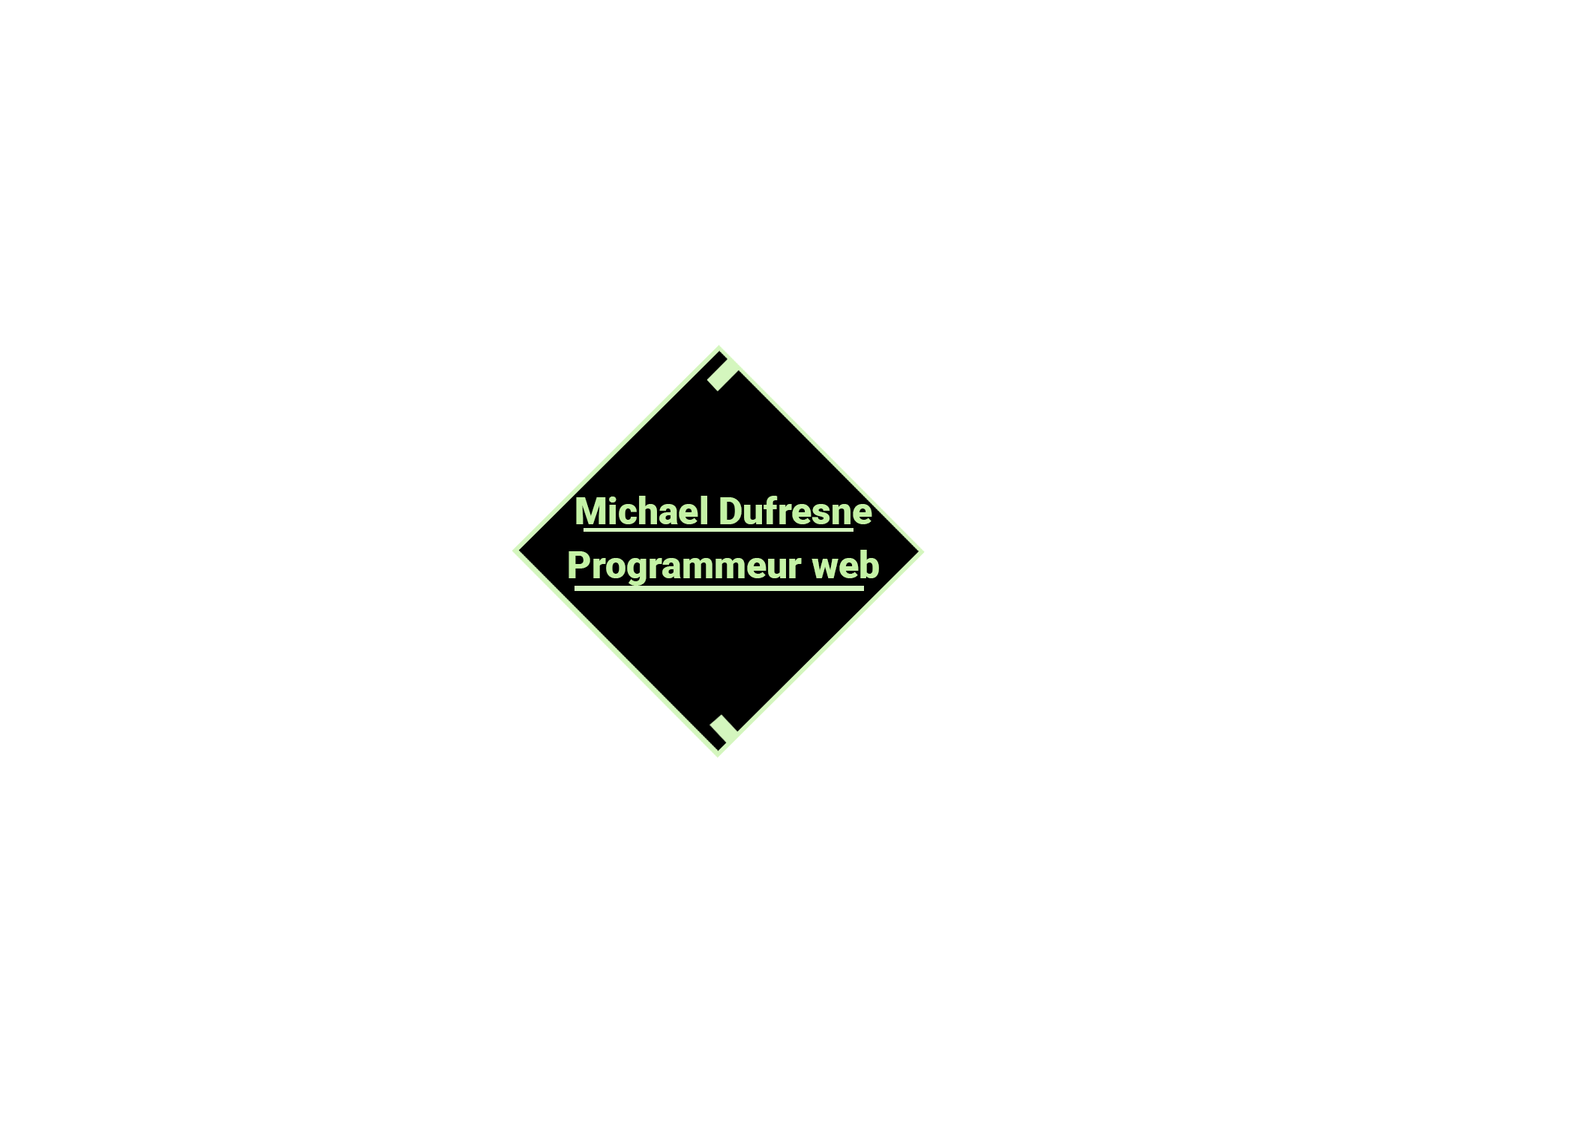
<style>
.page{position:relative;width:1575px;height:1125px;background:#ffffff}
.page>*{position:absolute;margin:0}
.t1{font:9px "Roboto-Black";color:#c4f2a5}
</style>
<div class="page">
<p class="t1" style="left:576px;top:496px;width:296px;height:28px">Michael Dufresne</p>
<p class="t1" style="left:568px;top:550px;width:311px;height:36px">Programmeur web</p>
</div>
